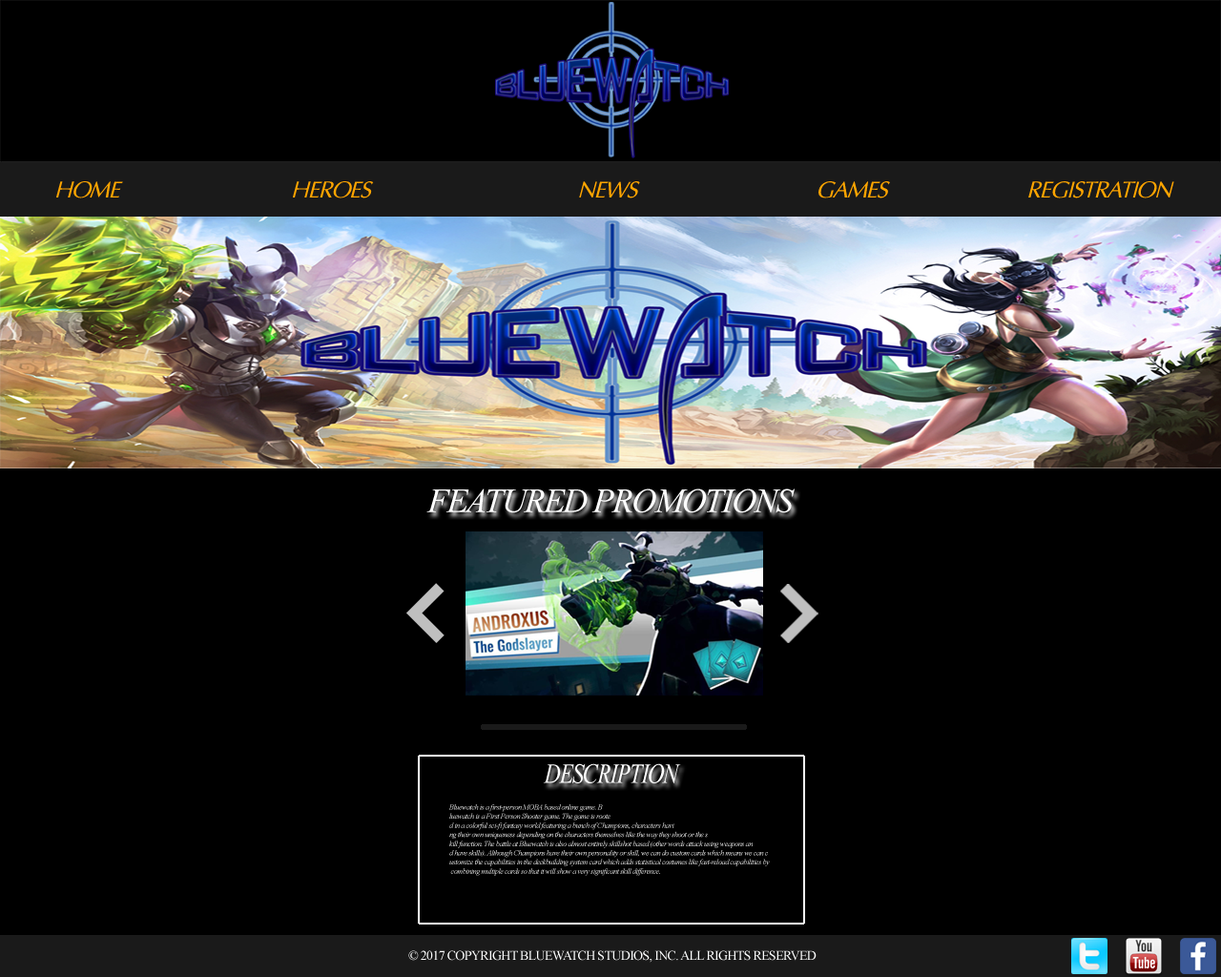
<style>
.page{position:relative;width:1221px;height:977px;background:#000000}
.page>*{position:absolute;margin:0}
.t1{font:22.9px "Optima-Italic";letter-spacing:-0.05em;color:#ffa500}
.t2{font:34.3px "TimesNewRomanPS-ItalicMT";letter-spacing:-0.05em;color:#ffffff}
.t3{font:27.9px "TimesNewRomanPS-ItalicMT";letter-spacing:-0.05em;color:#ffffff;scale:0.83 1}
.t4{font:7.6px "TimesNewRomanPS-ItalicMT";letter-spacing:-0.05em}
.t5{font:13.4px "TimesNewRomanPSMT";letter-spacing:-0.05em;color:#feffff}
</style>
<div class="page">
<p class="t1" style="left:56px;top:181px;width:67px;height:17px">HOME</p>
<p class="t1" style="left:293px;top:181px;width:81px;height:17px">HEROES</p>
<p class="t1" style="left:579px;top:181px;width:61px;height:17px">NEWS</p>
<p class="t1" style="left:818px;top:181px;width:72px;height:17px">GAMES</p>
<p class="t1" style="left:1028px;top:181px;width:146px;height:17px">REGISTRATION</p>
<p class="t2" style="left:426px;top:488px;width:369px;height:25px">FEATURED PROMOTIONS</p>
<p class="t3" style="left:543px;top:763px;width:138px;height:20px">DESCRIPTION</p>
<p class="t4" style="left:448px;top:804px;width:322px;height:72px">Bluewatch is a first-person MOBA based online game. B<br>luewatch is a First Person Shooter game. The game is roote<br>d in a colorful sci-fi fantasy world featuring a bunch of Champions, characters havi<br>ng their own uniqueness depending on the characters themselves like the way they shoot or the s<br>kill function. The battle at Bluewatch is also almost entirely skillshot based (other words attack using weapons an<br>d have skills). Although Champions have their own personality or skill, we can do custom cards which means we can c<br>ustomize the capabilities in the deckbuilding system card which adds statistical costumes like fast-reload capabilities by<br> combining multiple cards so that it will show a very significant skill difference.</p>
<p class="t5" style="left:408px;top:950px;width:408px;height:12px">© 2017 COPYRIGHT BLUEWATCH STUDIOS, INC. ALL RIGHTS RESERVED</p>
</div>
